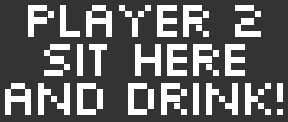
<style>
.page{position:relative;width:288px;height:122px;background:#333333}
.page>*{position:absolute;margin:0}
.t1{font:54px/39px "Silkscreen";letter-spacing:-0.12em;color:#ffffff}
</style>
<div class="page">
<p class="t1" style="left:5px;top:5px;width:278px;height:110px;text-align:center">Player 2<br>sit here<br>and drink!</p>
</div>
